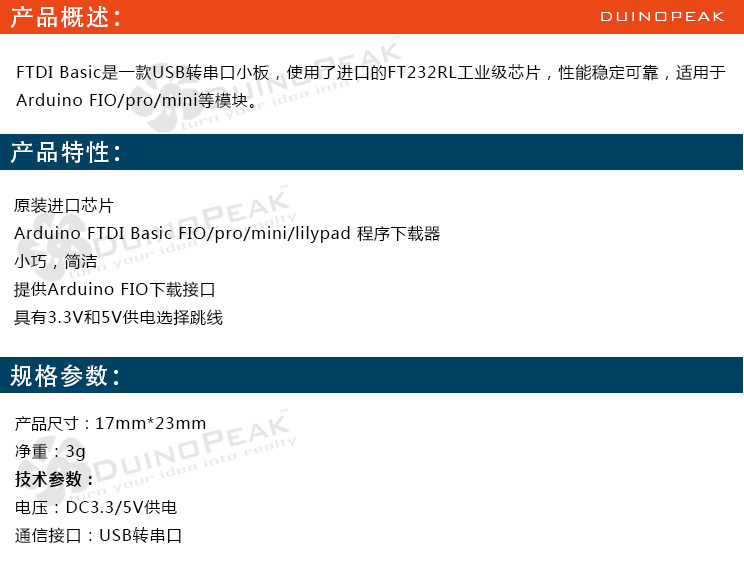
<style>
.page{position:relative;width:744px;height:563px;background:#ffffff}
.page>*{position:absolute;margin:0}
.t1{font:24px "AdobeHeitiStd-Regular";letter-spacing:0.05em;color:#ffffff}
.t2{font:18px "BankGothicBT-Light";letter-spacing:0.05em;color:#ffffff}
.t3{font:16px "MicrosoftYaHei";letter-spacing:0.05em;color:#000000}
.t4{font:16px "MicrosoftYaHei";color:#000000}
.t5{font:16px "MicrosoftYaHei-Bold";letter-spacing:0.05em;color:#000000}
</style>
<div class="page">
<p class="t1" style="left:10px;top:6px;width:109px;height:23px">产品概述：</p>
<p class="t2" style="left:601px;top:12px;width:124px;height:9px">DUINOPEAK</p>
<p class="t3" style="left:16px;top:64px;width:710px;height:46px">FTDI Basic是一款USB转串口小板，使用了进口的FT232RL工业级芯片，性能稳定可靠，适用于<br>Arduino FIO/pro/mini等模块。</p>
<p class="t1" style="left:10px;top:140px;width:109px;height:24px">产品特性：</p>
<p class="t3" style="left:14px;top:197px;width:426px;height:129px">原装进口芯片<br>Arduino FTDI Basic FIO/pro/mini/lilypad 程序下载器 <br>小巧，简洁<br>提供Arduino FIO下载接口<br>具有3.3V和5V供电选择跳线</p>
<p class="t1" style="left:10px;top:364px;width:108px;height:23px">规格参数：</p>
<p class="t3" style="left:15px;top:416px;width:191px;height:127px"><span class="t4">产品尺寸：</span>17mm*23mm<br>净重：3g<br><span class="t5">技术参数：<br></span>电压：DC3.3/5V供电<br>通信接口：USB转串口</p>
</div>
